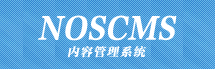
<style>
.page{position:relative;width:215px;height:69px}
.page>*{position:absolute;margin:0}
.t1{font:30px "FZFYSJW--GB1-0";color:#ffffff;font-style:italic}
.t2{font:12px "FZFYSJW--GB1-0";letter-spacing:0.1em;color:#ffffff;font-style:italic}
</style>
<div class="page">
<p class="t1" style="left:38px;top:15px;width:139px;height:26px">NOSCMS</p>
<p class="t2" style="left:67px;top:46px;width:80px;height:12px">内容管理系统</p>
</div>
